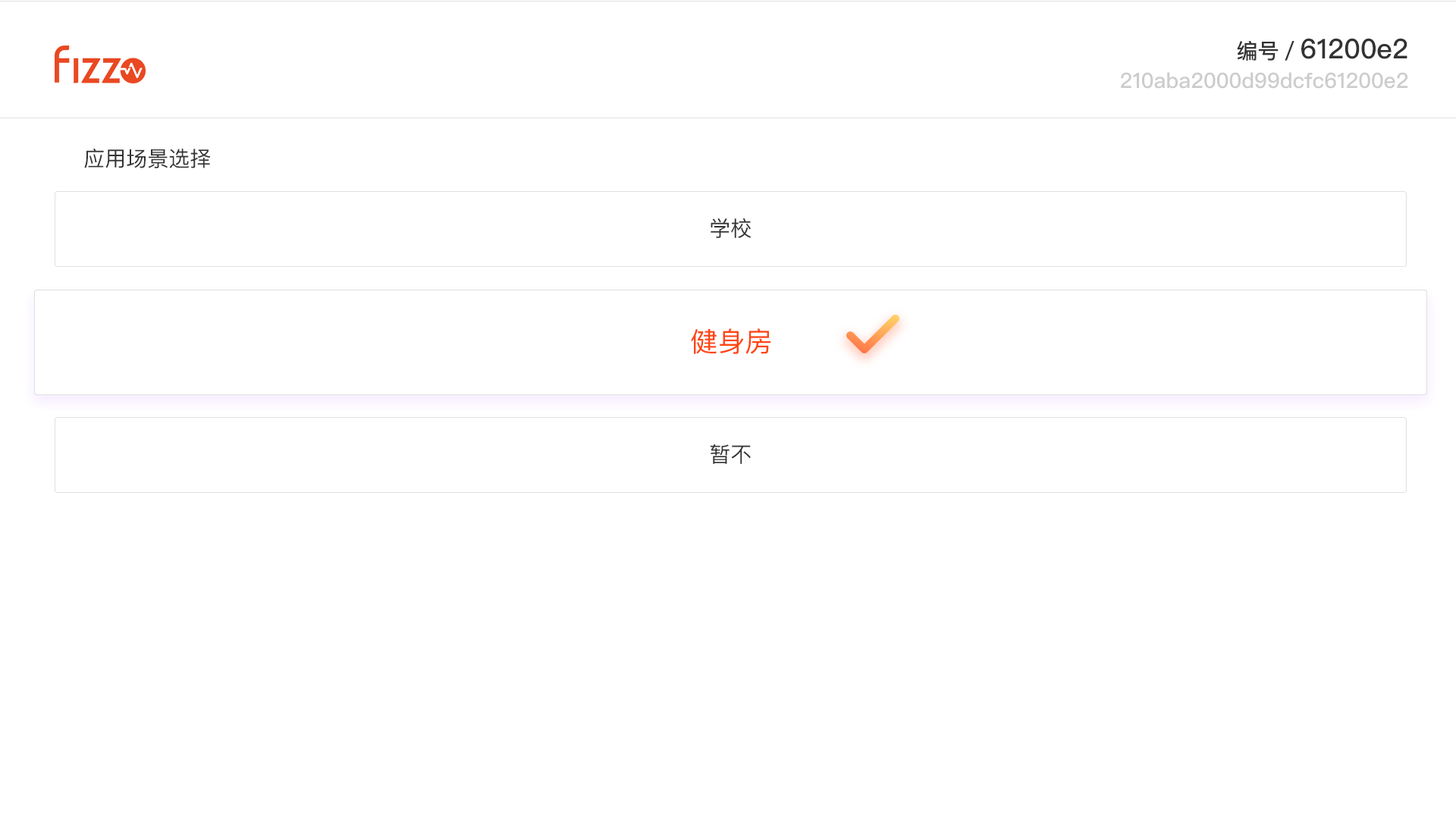
<style>
.page{position:relative;width:1456px;height:819px;background:#ffffff}
.page>*{position:absolute;margin:0}
.t1{font:27.3px "PingFangSC-Medium";color:#333333}
.t2{font:21.2px "PingFangSC-Medium";color:#333333}
.t3{font:21.2px "PingFangSC-Medium";color:#cccccc}
.t4{font:21.2px "PingFangSC-Regular";color:#333333}
.t5{font:27.3px "PingFangSC-Regular";color:#ff4612}
</style>
<div class="page">
<p class="t1" style="left:1237px;top:38px;width:170px;height:23px"><span class="t2">编号／</span>61200e2</p>
<p class="t3" style="left:1121px;top:72px;width:286px;height:17px">210aba2000d99dcfc61200e2</p>
<p class="t4" style="left:84px;top:149px;width:127px;height:19px">应用场景选择</p>
<p class="t4" style="left:711px;top:218px;width:40px;height:20px">学校</p>
<p class="t5" style="left:691px;top:328px;width:80px;height:26px">健身房</p>
<p class="t5" style="left:691px;top:328px;width:80px;height:26px">健身房</p>
<p class="t4" style="left:710px;top:444px;width:41px;height:20px">暂不</p>
</div>
